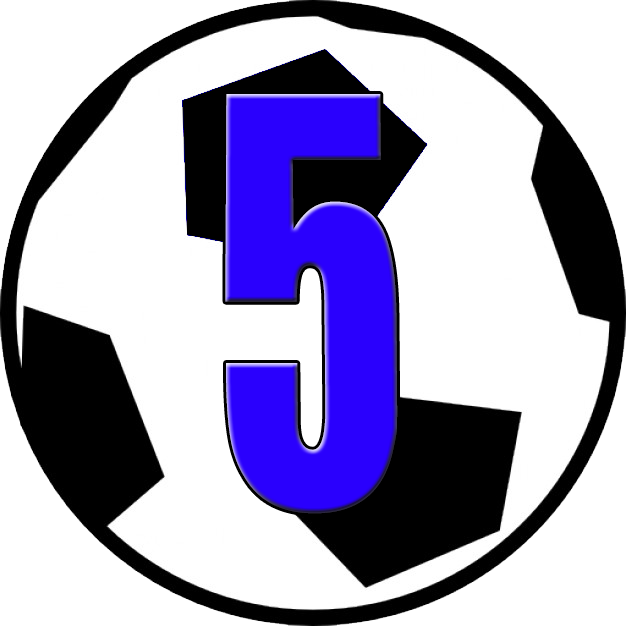
<style>
.page{position:relative;width:626px;height:626px;background:#ffffff}
.page>*{position:absolute;margin:0}
.t1{font:612px "JCHEadA";color:#2a00fd;scale:0.78 1}
</style>
<div class="page">
<p class="t1" style="left:225px;top:94px;width:173px;height:420px">5</p>
</div>
